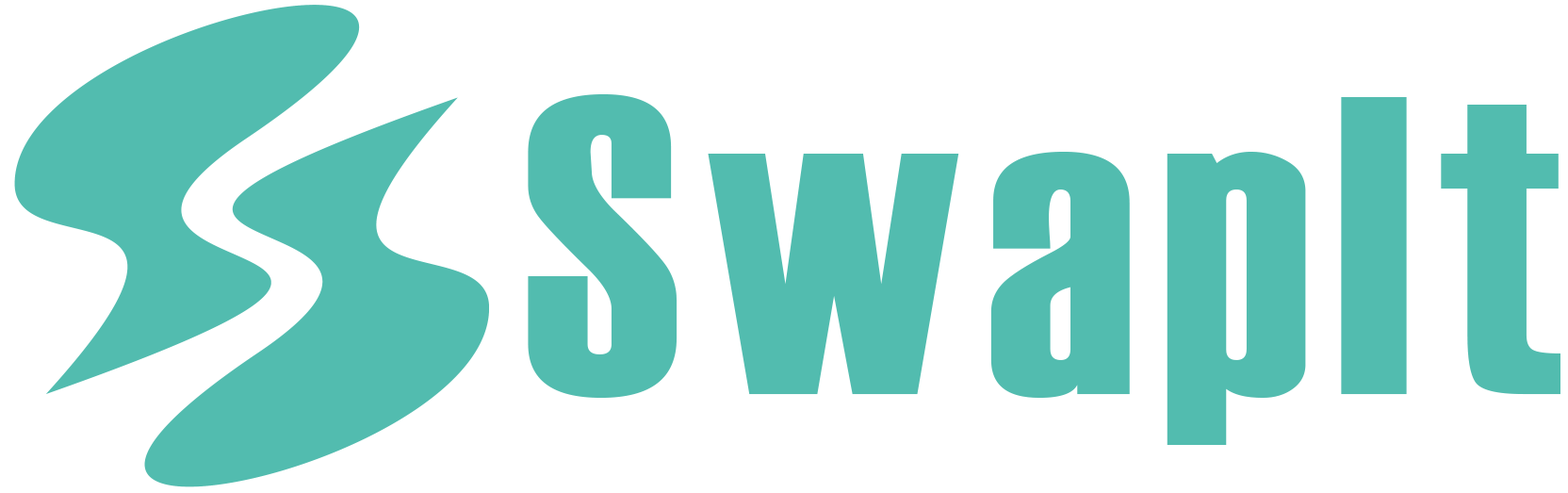
<style>
.page{position:relative;width:1568px;height:493px;background:#ffffff}
.page>*{position:absolute;margin:0}
.t1{font:424px "Haettenschweiler";letter-spacing:0.056em;color:#52bcaf}
</style>
<div class="page">
<p class="t1" style="left:528px;top:94px;width:1032px;height:351px">SwapIt</p>
</div>
